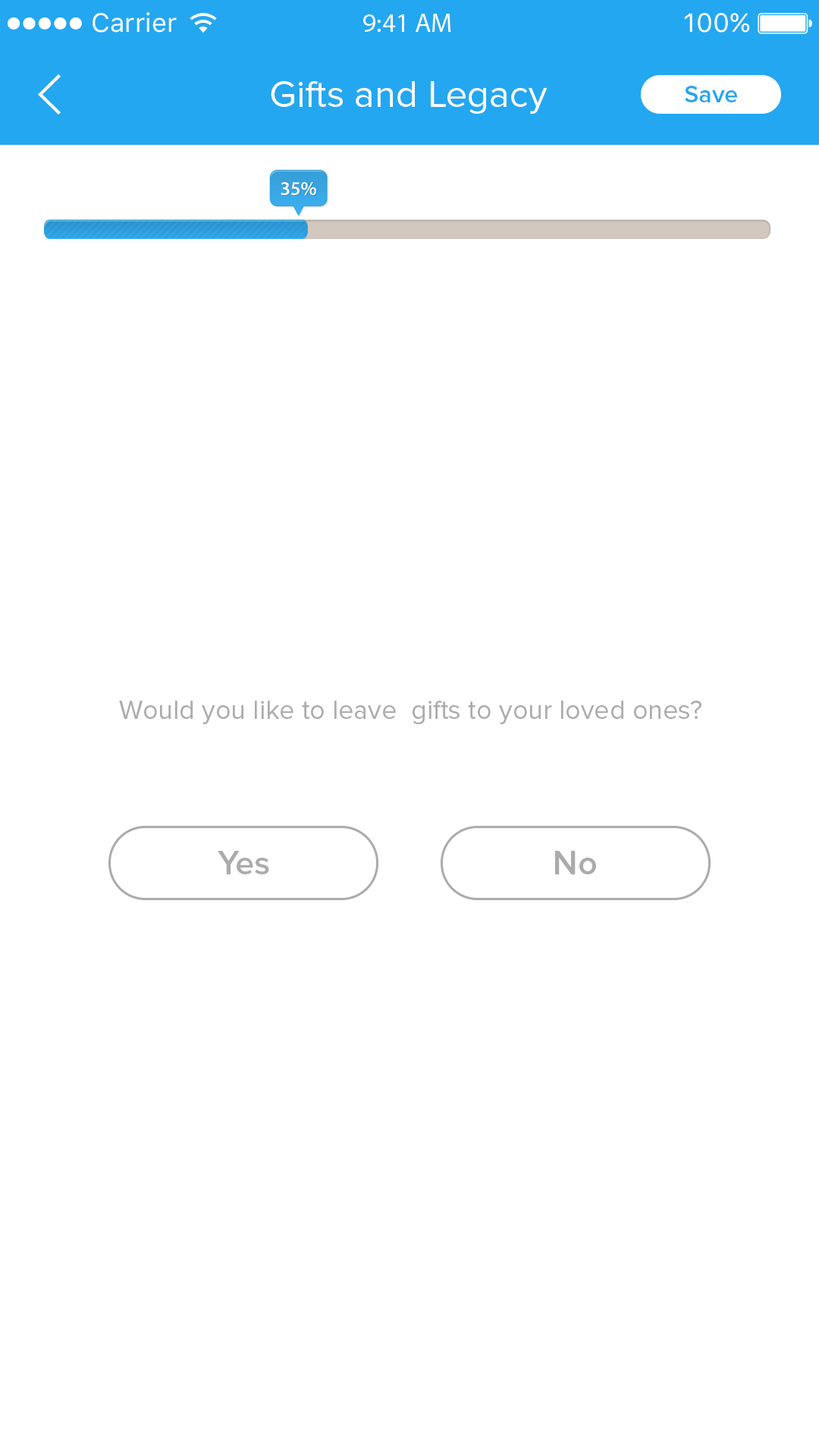
<style>
.page{position:relative;width:819px;height:1456px;background:#ffffff}
.page>*{position:absolute;margin:0}
.t1{font:38.1px "ProximaNova-Regular";color:#ffffff}
.t2{font:24.7px "ProximaNova-Semibold";color:#23a7f1}
.t3{font:19.2px "MyriadPro-Semibold";color:#ffffff}
.t4{font:27.3px "ProximaNova-Regular";color:#ababad}
.t5{font:34.1px "ProximaNova-Semibold";color:#ababad}
</style>
<div class="page">
<p class="t1" style="left:271px;top:81px;width:277px;height:33px">Gifts and Legacy</p>
<p class="t2" style="left:685px;top:86px;width:52px;height:16px">Save</p>
<p class="t3" style="left:281px;top:182px;width:35px;height:14px">35%</p>
<p class="t4" style="left:119px;top:701px;width:582px;height:23px">Would you like to leave  gifts to your loved ones?</p>
<p class="t5" style="left:218px;top:851px;width:51px;height:23px">Yes</p>
<p class="t5" style="left:555px;top:851px;width:41px;height:23px">No</p>
</div>
